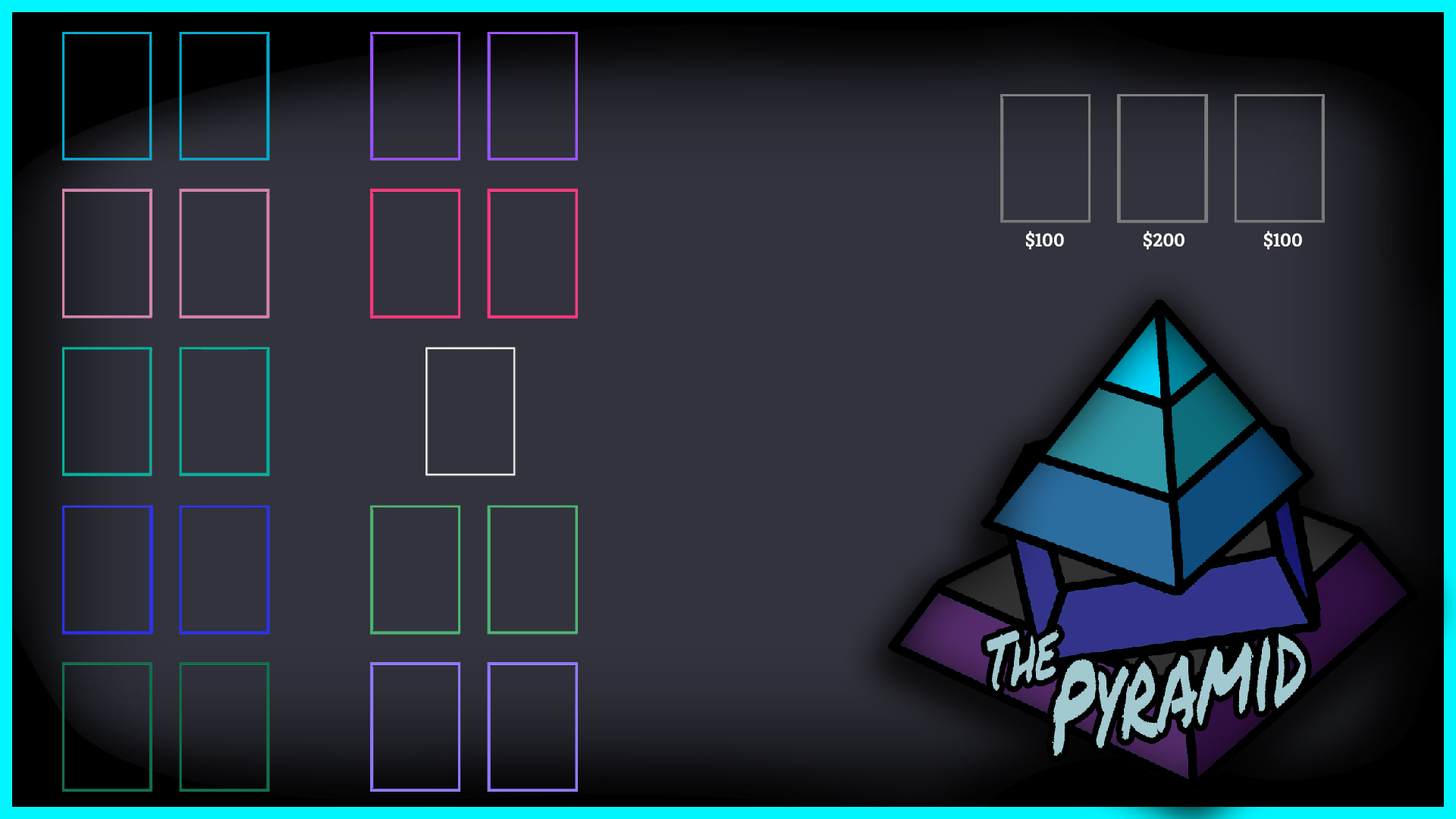
<style>
.page{position:relative;width:1456px;height:819px;background:#33333d}
.page>*{position:absolute;margin:0}
.t1{font:19px "Kreon-Bold";color:#ffffff}
</style>
<div class="page">
<p class="t1" style="left:1025px;top:231px;width:39px;height:18px">$100</p>
<p class="t1" style="left:1143px;top:231px;width:42px;height:18px">$200</p>
<p class="t1" style="left:1263px;top:231px;width:39px;height:18px">$100</p>
</div>
